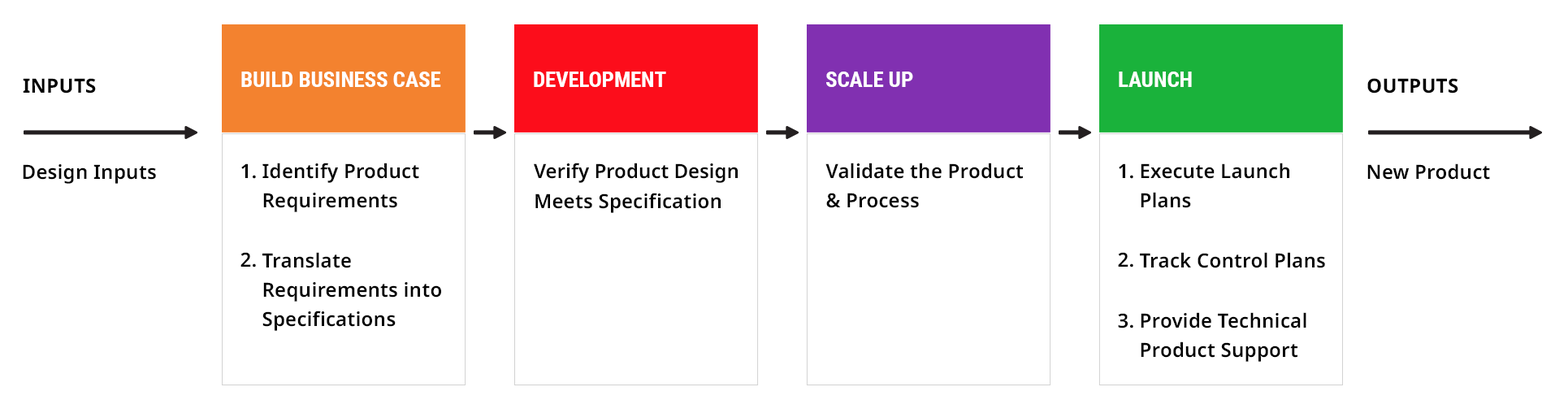
<style>
.page{position:relative;width:1568px;height:413px;background:#ffffff}
.page>*{position:absolute;margin:0}
.t1{font:19.5px "NotoSans-Bold";letter-spacing:0.01em;color:#000000;text-transform:uppercase}
.t2{font:21.7px "RobotoCondensed-Bold";color:#ffffff;text-transform:uppercase}
.t3{font:19.5px "NotoSans-SemiBold";letter-spacing:0.01em;color:#000000}
.t4{font:19.5px/29.2px "NotoSans-SemiBold";letter-spacing:0.01em;color:#000000}
.t5{font:19.5px/29.2px "NotoSans-SemiBold";color:#000000}
</style>
<div class="page">
<p class="t1" style="left:23px;top:78px;width:73px;height:15px">Inputs</p>
<p class="t2" style="left:241px;top:71px;width:200px;height:16px">Build Business Case</p>
<p class="t2" style="left:534px;top:71px;width:132px;height:16px">Development</p>
<p class="t2" style="left:826px;top:71px;width:87px;height:16px">Scale Up</p>
<p class="t2" style="left:1119px;top:71px;width:73px;height:16px">Launch</p>
<p class="t1" style="left:1367px;top:78px;width:91px;height:15px">Outputs</p>
<p class="t3" style="left:23px;top:164px;width:133px;height:20px">Design Inputs</p>
<p class="t3" style="left:241px;top:163px;width:15px;height:16px">1.</p>
<p class="t4" style="left:262px;top:162px;width:179px;height:169px">Identify Product Requirements <br><br>Translate Requirements into Specifications</p>
<p class="t5" style="left:534px;top:162px;width:204px;height:51px">Verify Product Design<br><span class="t4">Meets Specification</span></p>
<p class="t4" style="left:825px;top:162px;width:198px;height:46px">Validate the Product &amp; Process</p>
<p class="t3" style="left:1119px;top:163px;width:14px;height:16px">1.</p>
<p class="t4" style="left:1140px;top:162px;width:185px;height:200px">Execute Launch Plans<br><br>Track Control Plans<br><br>Provide Technical Product Support</p>
<p class="t3" style="left:1367px;top:163px;width:123px;height:17px">New Product</p>
<p class="t3" style="left:240px;top:252px;width:16px;height:15px">2.</p>
<p class="t3" style="left:1118px;top:252px;width:15px;height:15px">2.</p>
<p class="t3" style="left:1118px;top:313px;width:15px;height:15px">3.</p>
</div>
